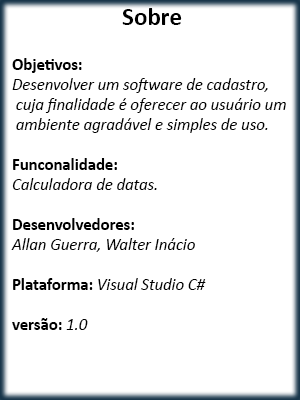
<style>
.page{position:relative;width:300px;height:400px;background:#ffffff}
.page>*{position:absolute;margin:0}
.t1{font:25px "Calibri-Bold";color:#000000}
.t2{font:16.7px "Calibri-Italic";color:#000000}
.t3{font:16.7px "Calibri-Bold";color:#000000}
</style>
<div class="page">
<p class="t1" style="left:122px;top:8px;width:60px;height:17px">Sobre</p>
<p class="t2" style="left:11px;top:58px;width:275px;height:272px"><span class="t3">Objetivos:</span> <br>Desenvolver um software de cadastro,<br> cuja finalidade é oferecer ao usuário um<br> ambiente agradável e simples de uso.<br><br><span class="t3">Funconalidade:<br></span>Calculadora de datas.<br> <br><span class="t3">Desenvolvedores:<br></span>Allan Guerra, Walter Inácio<br><br><span class="t3">Plataforma:</span> Visual Studio C#<br><br><span class="t3">versão:</span> 1.0</p>
</div>
